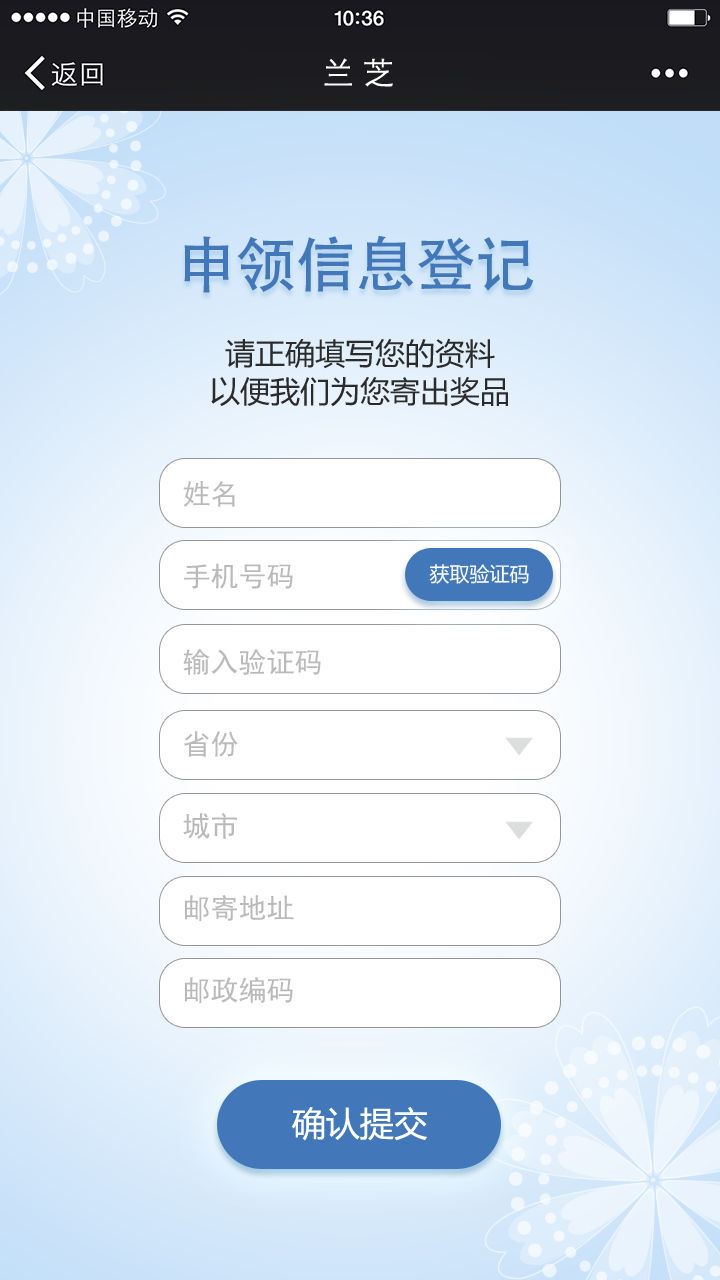
<style>
.page{position:relative;width:720px;height:1280px}
.page>*{position:absolute;margin:0}
.t1{font:31.7px "STXihei";letter-spacing:-0.02em;color:#ffffff;font-weight:bold}
.t2{font:60px "AdobeHeitiStd-Regular";color:#4278b9}
.t3{font:30px/38px "MicrosoftYaHei";color:#2b2b2b}
.t4{font:28px/82px "SimHei";color:#bababa}
.t5{font:28px/86px "SimHei";color:#bababa}
.t6{font:20px "MicrosoftYaHei";color:#ffffff}
.t7{font:34px "MicrosoftYaHei";color:#ffffff}
</style>
<div class="page">
<p class="t1" style="left:324px;top:58px;width:69px;height:29px">兰 芝</p>
<p class="t2" style="left:184px;top:235px;width:350px;height:58px">申领信息登记</p>
<p class="t3" style="left:211px;top:338px;width:297px;height:69px;text-align:center">请正确填写您的资料<br>以便我们为您寄出奖品</p>
<p class="t4" style="left:183px;top:481px;width:138px;height:522px">姓名<br><span class="t5">手机号码<br></span>输入验证码<br>省份<br>城市<br>邮寄地址<br>邮政编码</p>
<p class="t6" style="left:429px;top:564px;width:100px;height:20px">获取验证码</p>
<p class="t7" style="left:292px;top:1107px;width:135px;height:34px">确认提交</p>
</div>
